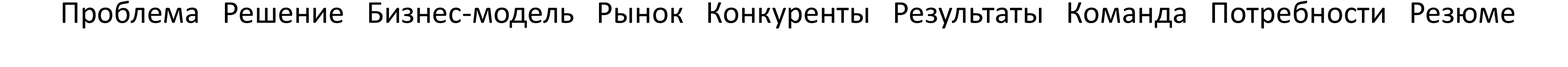
<style>
.page{position:relative;width:1568px;height:67px;background:#ffffff}
.page>*{position:absolute;margin:0}
.t1{font:32.3px "Calibri";color:#000000}
</style>
<div class="page">
<p class="t1" style="left:63px;top:0px;width:1452px;height:29px">Проблема   Решение   Бизнес-модель   Рынок   Конкуренты   Результаты   Команда   Потребности   Резюме</p>
</div>
